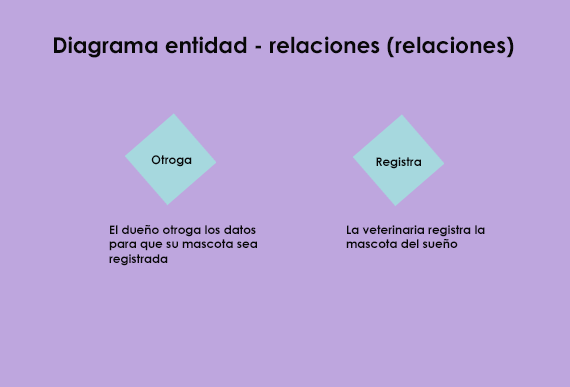
<style>
.page{position:relative;width:570px;height:387px;background:#bea6de}
.page>*{position:absolute;margin:0}
.t1{font:22px "CenturyGothic-Bold";color:#080808}
.t2{font:12px "CenturyGothic-Bold";color:#080808}
</style>
<div class="page">
<p class="t1" style="left:54px;top:36px;width:460px;height:22px">Diagrama entidad - relaciones (relaciones)</p>
<p class="t2" style="left:151px;top:155px;width:41px;height:12px">Otroga</p>
<p class="t2" style="left:376px;top:157px;width:45px;height:12px">Registra</p>
<p class="t2" style="left:109px;top:225px;width:148px;height:41px">El dueño otroga los datos para que su mascota sea registrada</p>
<p class="t2" style="left:346px;top:225px;width:139px;height:23px">La veterinaria registra la mascota del sueño</p>
</div>
